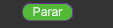
<style>
.page{position:relative;width:113px;height:28px;background:#333333}
.page>*{position:absolute;margin:0}
.t1{font:12.2px "ArialMT";color:#ffffff}
</style>
<div class="page">
<p class="t1" style="left:33px;top:7px;width:30px;height:9px">Parar</p>
</div>
